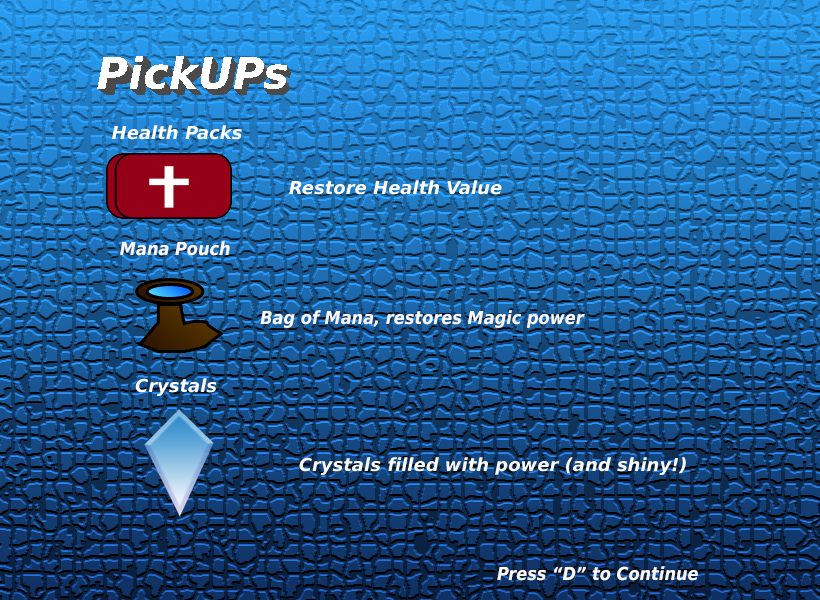
<style>
.page{position:relative;width:820px;height:600px}
.page>*{position:absolute;margin:0}
.t1{font:18px "DejaVuSans-BoldOblique";color:#fefbfb}
.t2{font:18px "DejaVuSansCondensed-BoldOblique";color:#fdf8f8}
</style>
<div class="page">
<p class="t1" style="left:112px;top:125px;width:130px;height:15px">Health Packs</p>
<p class="t1" style="left:289px;top:180px;width:213px;height:15px">Restore Health Value</p>
<p class="t2" style="left:120px;top:241px;width:110px;height:15px">Mana Pouch</p>
<p class="t2" style="left:260px;top:310px;width:325px;height:18px">Bag of Mana, restores Magic power</p>
<p class="t1" style="left:135px;top:378px;width:82px;height:18px">Crystals</p>
<p class="t1" style="left:299px;top:457px;width:387px;height:18px">Crystals filled with power (and shiny!)</p>
<p class="t2" style="left:497px;top:566px;width:201px;height:15px">Press “D” to Continue</p>
</div>
